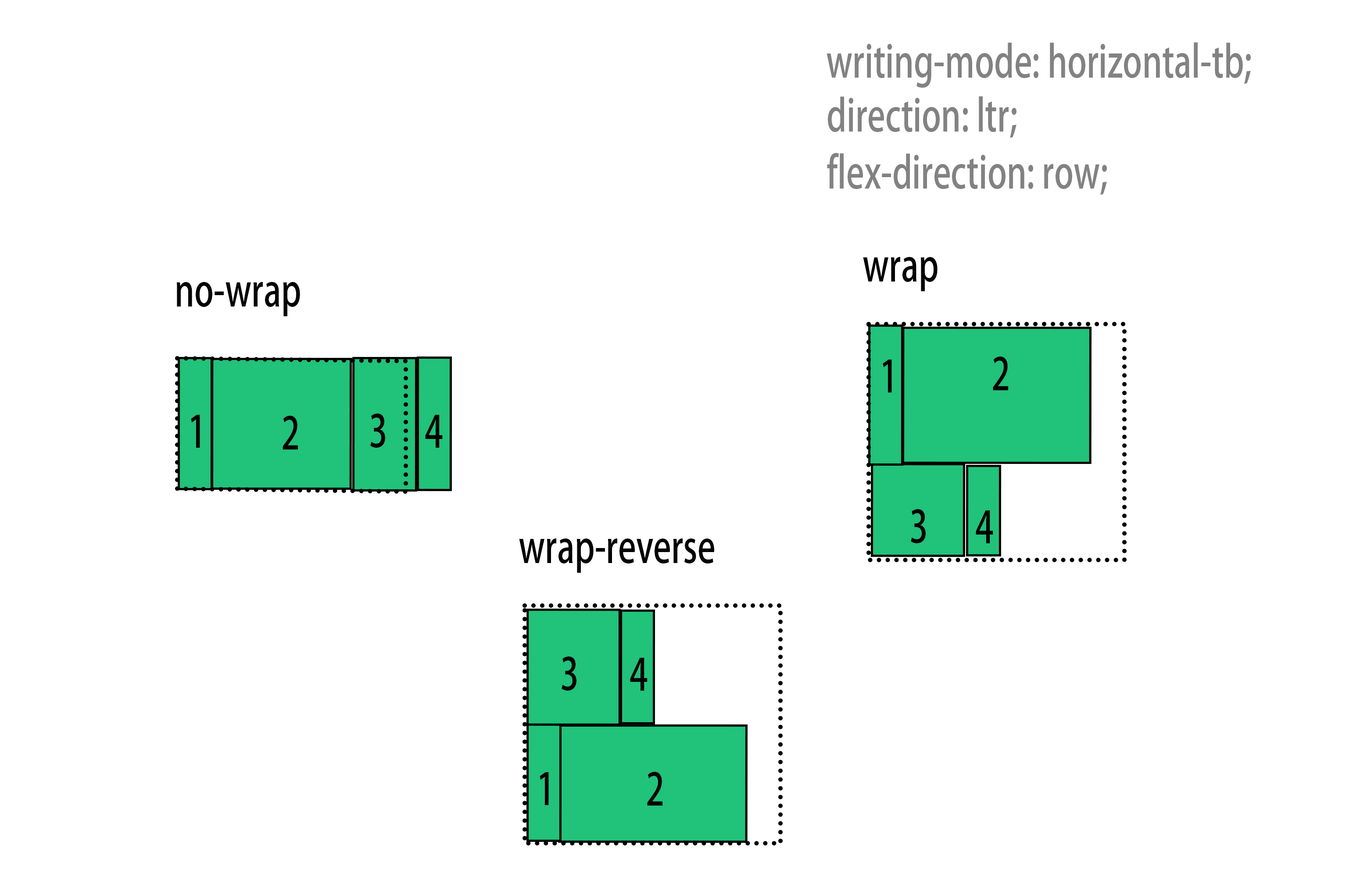
<style>
.page{position:relative;width:1360px;height:877px;background:#ffffff}
.page>*{position:absolute;margin:0}
.t1{font:43.9px "AdobeHeitiStd-Regular";color:#828282;scale:0.75 1}
.t2{font:43.9px "AdobeHeitiStd-Regular";color:#030303;scale:0.75 1}
.t3{font:43.9px "AdobeHeitiStd-Regular";color:#000000;scale:0.75 1}
</style>
<div class="page">
<p class="t1" style="left:826px;top:42px;width:424px;height:46px">writing-mode: horizontal-tb;</p>
<p class="t1" style="left:828px;top:96px;width:188px;height:42px">direction: ltr;</p>
<p class="t1" style="left:827px;top:153px;width:279px;height:42px">flex-direction: row;</p>
<p class="t2" style="left:863px;top:257px;width:74px;height:35px">wrap</p>
<p class="t2" style="left:177px;top:282px;width:123px;height:35px">no-wrap</p>
<p class="t3" style="left:882px;top:360px;width:10px;height:33px">1</p>
<p class="t3" style="left:992px;top:357px;width:16px;height:33px">2</p>
<p class="t3" style="left:370px;top:414px;width:15px;height:34px">3</p>
<p class="t3" style="left:191px;top:415px;width:9px;height:33px">1</p>
<p class="t3" style="left:282px;top:416px;width:16px;height:34px">2</p>
<p class="t3" style="left:425px;top:415px;width:17px;height:33px">4</p>
<p class="t3" style="left:910px;top:509px;width:15px;height:34px">3</p>
<p class="t3" style="left:975px;top:510px;width:18px;height:33px">4</p>
<p class="t2" style="left:519px;top:539px;width:195px;height:34px">wrap-reverse</p>
<p class="t3" style="left:561px;top:657px;width:15px;height:34px">3</p>
<p class="t3" style="left:630px;top:658px;width:17px;height:33px">4</p>
<p class="t3" style="left:539px;top:772px;width:10px;height:33px">1</p>
<p class="t3" style="left:647px;top:772px;width:15px;height:34px">2</p>
</div>
